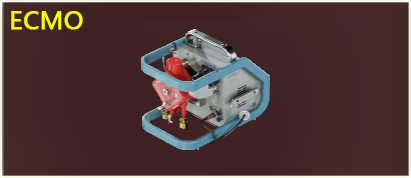
<style>
.page{position:relative;width:411px;height:178px}
.page>*{position:absolute;margin:0}
.t1{font:24px "MicrosoftYaHeiUI";color:#f4ff00;font-weight:bold}
</style>
<div class="page">
<p class="t1" style="left:11px;top:11px;width:72px;height:19px">ECMO</p>
</div>
